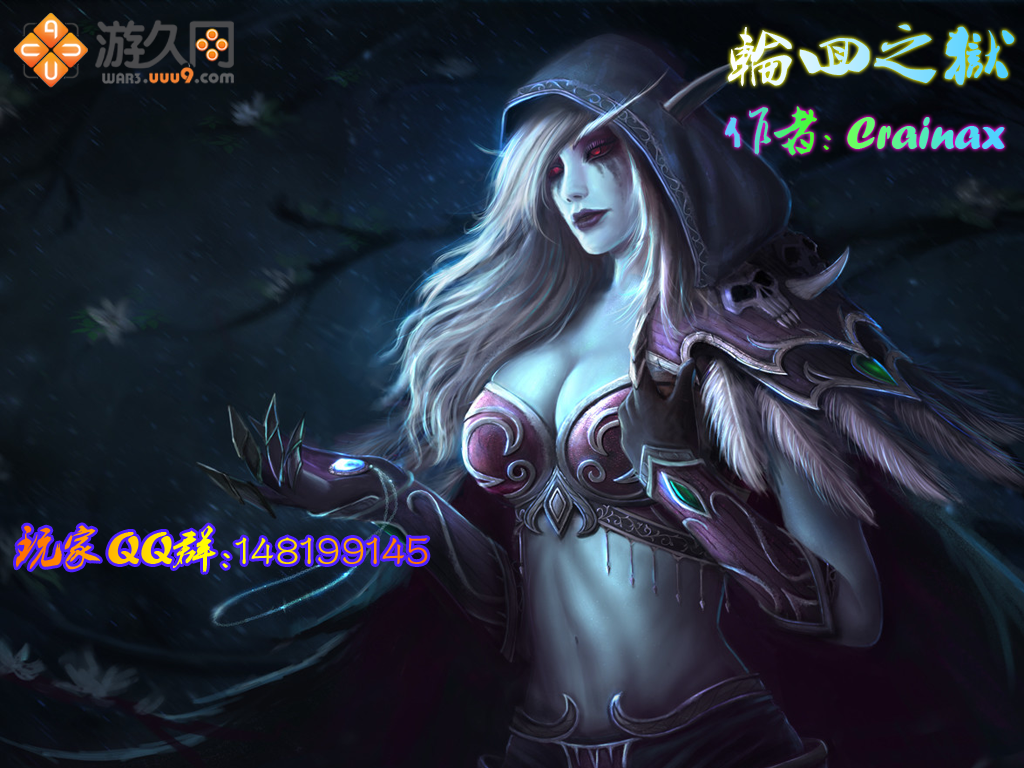
<style>
.page{position:relative;width:1024px;height:768px}
.page>*{position:absolute;margin:0}
.t1{font:72px "Ò¶¸ùÓÑÐÐÊé·±"}
.t2{font:48px "Ò¶¸ùÓÑÐÐÊé·±"}
.t3{font:48px "ForteMT"}
.t4{font:48px "FZSTK--GBK1-0"}
.t5{font:48px "-"}
</style>
<div class="page">
<p class="t1" style="left:727px;top:24px;width:288px;height:63px">轮回之狱</p>
<p class="t2" style="left:724px;top:106px;width:107px;height:50px">作者:</p>
<p class="t3" style="left:847px;top:117px;width:158px;height:32px">Crainax</p>
<p class="t4" style="left:16px;top:525px;width:412px;height:47px"><span class="t5">玩家</span><span class="t3">QQ</span><span class="t5">群</span><span class="t2">:</span>148199145</p>
</div>
